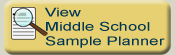
<style>
.page{position:relative;width:175px;height:55px;background:#e6d071}
.page>*{position:absolute;margin:0}
.t1{font:12px "ArialMT";color:#00355a;scale:1.4 1}
</style>
<div class="page">
<p class="t1" style="left:44px;top:7px;width:121px;height:41px">View<br>Middle School<br>Sample Planner</p>
<p class="t1" style="left:44px;top:7px;width:121px;height:41px">View<br>Middle School<br>Sample Planner</p>
</div>
